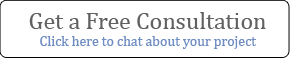
<style>
.page{position:relative;width:290px;height:58px;background:#ffffff}
.page>*{position:absolute;margin:0}
.t1{font:24px "Cambria";color:#616161}
.t2{font:14px "Cambria";color:#718ec3}
</style>
<div class="page">
<p class="t1" style="left:29px;top:12px;width:237px;height:17px">Get a Free Consultation</p>
<p class="t2" style="left:40px;top:36px;width:217px;height:13px">Click here to chat about your project</p>
</div>
